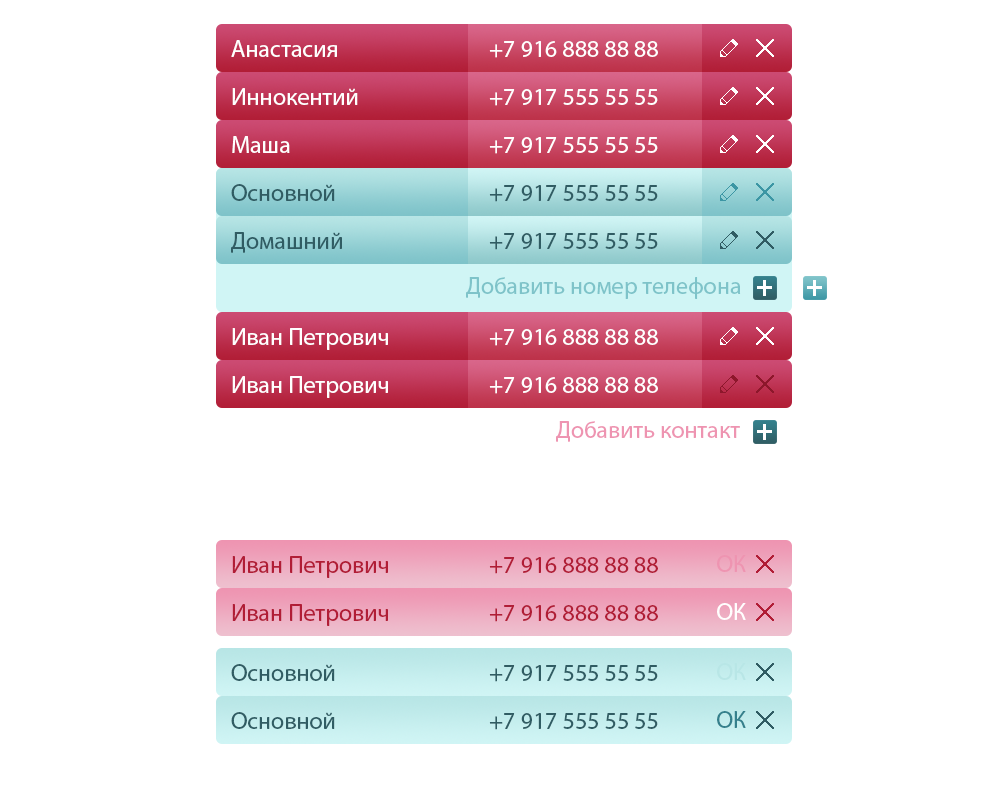
<style>
.page{position:relative;width:1000px;height:800px;background:#ffffff}
.page>*{position:absolute;margin:0}
.t1{font:24px "MyriadPro-Regular";color:#ffffff}
.t2{font:24px "MyriadPro-Regular";color:#305c63}
.t3{font:24px "MyriadPro-Regular";color:#7ec3c9}
.t4{font:30px "MyriadPro-Bold";color:#ffffff}
.t5{font:24px "MyriadPro-Regular";color:#ee94b1}
.t6{font:24px "MyriadPro-Regular";color:#b11d36}
.t7{font:24px "MyriadPro-Regular";color:#fffefe}
.t8{font:24px "MyriadPro-Regular";color:#b8e6e6}
.t9{font:24px "MyriadPro-Regular";color:#34808c}
</style>
<div class="page">
<p class="t1" style="left:231px;top:40px;width:106px;height:17px">Анастасия</p>
<p class="t1" style="left:489px;top:41px;width:169px;height:17px">+7 916 888 88 88</p>
<p class="t1" style="left:232px;top:88px;width:126px;height:17px">Иннокентий</p>
<p class="t1" style="left:489px;top:89px;width:169px;height:17px">+7 917 555 55 55</p>
<p class="t1" style="left:232px;top:136px;width:58px;height:17px">Маша</p>
<p class="t1" style="left:489px;top:137px;width:169px;height:17px">+7 917 555 55 55</p>
<p class="t2" style="left:231px;top:184px;width:104px;height:17px">Основной</p>
<p class="t2" style="left:489px;top:185px;width:169px;height:17px">+7 917 555 55 55</p>
<p class="t2" style="left:231px;top:232px;width:111px;height:21px">Домашний</p>
<p class="t2" style="left:489px;top:233px;width:169px;height:17px">+7 917 555 55 55</p>
<p class="t3" style="left:466px;top:277px;width:275px;height:22px">Добавить номер телефона</p>
<p class="t4" style="left:757px;top:280px;width:15px;height:16px">+</p>
<p class="t4" style="left:807px;top:280px;width:15px;height:16px">+</p>
<p class="t1" style="left:232px;top:328px;width:156px;height:22px">Иван Петрович</p>
<p class="t1" style="left:489px;top:329px;width:169px;height:17px">+7 916 888 88 88</p>
<p class="t1" style="left:232px;top:376px;width:156px;height:22px">Иван Петрович</p>
<p class="t1" style="left:489px;top:377px;width:169px;height:17px">+7 916 888 88 88</p>
<p class="t5" style="left:556px;top:421px;width:184px;height:21px">Добавить контакт</p>
<p class="t4" style="left:757px;top:424px;width:15px;height:16px">+</p>
<p class="t6" style="left:232px;top:556px;width:156px;height:22px">Иван Петрович</p>
<p class="t6" style="left:489px;top:557px;width:169px;height:17px">+7 916 888 88 88</p>
<p class="t5" style="left:717px;top:555px;width:29px;height:17px">ОК</p>
<p class="t6" style="left:232px;top:604px;width:156px;height:22px">Иван Петрович</p>
<p class="t6" style="left:489px;top:605px;width:169px;height:17px">+7 916 888 88 88</p>
<p class="t7" style="left:717px;top:603px;width:29px;height:17px">ОК</p>
<p class="t2" style="left:231px;top:664px;width:104px;height:17px">Основной</p>
<p class="t2" style="left:489px;top:665px;width:169px;height:17px">+7 917 555 55 55</p>
<p class="t8" style="left:717px;top:663px;width:29px;height:17px">ОК</p>
<p class="t2" style="left:231px;top:712px;width:104px;height:17px">Основной</p>
<p class="t2" style="left:489px;top:713px;width:169px;height:17px">+7 917 555 55 55</p>
<p class="t9" style="left:717px;top:711px;width:29px;height:17px">ОК</p>
</div>
